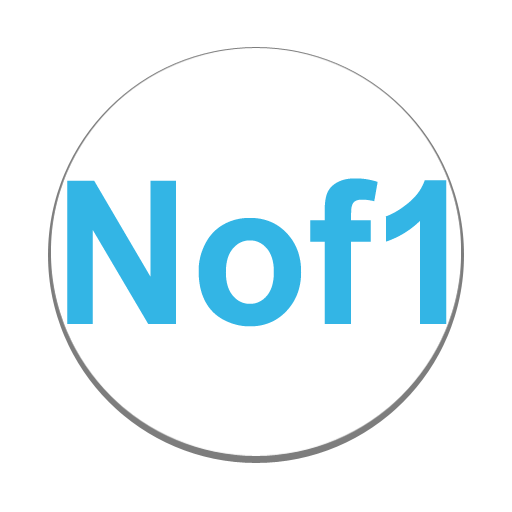
<style>
.page{position:relative;width:512px;height:512px;background:#ffffff}
.page>*{position:absolute;margin:0}
.t1{font:200px "Arial-BoldMT";color:#33b5e5;scale:0.96 1}
</style>
<div class="page">
<p class="t1" style="left:67px;top:178px;width:380px;height:149px">Nof1</p>
</div>
